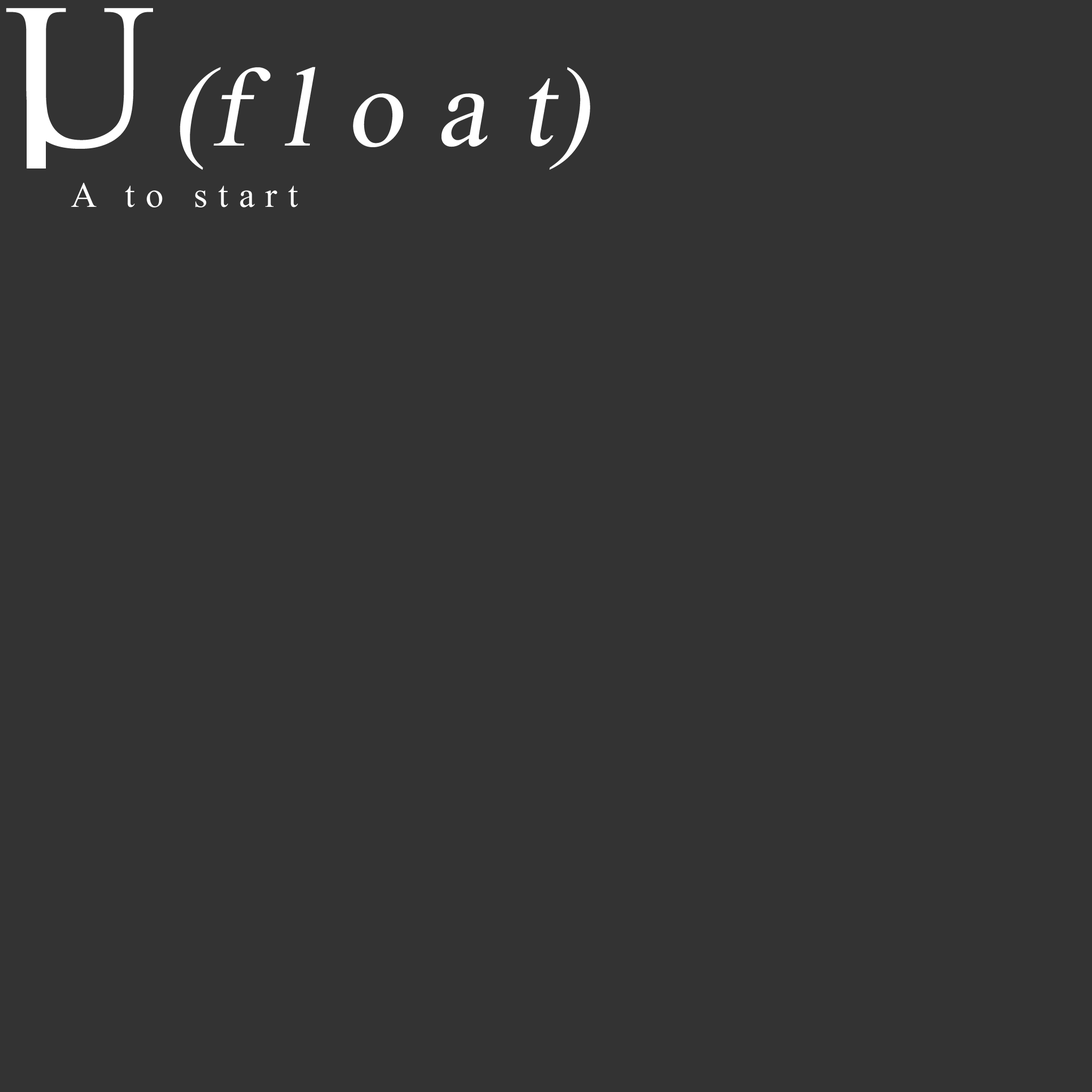
<style>
.page{position:relative;width:1092px;height:1092px;background:#333333}
.page>*{position:absolute;margin:0}
.t1{font:309.6px "Microsoft-Himalaya";letter-spacing:-0.075em;color:#ffffff}
.t2{font:168.5px "Microsoft-Himalaya";letter-spacing:0.2em;color:#ffffff;font-style:italic}
.t3{font:168.5px "Microsoft-Himalaya";color:#ffffff;font-style:italic}
.t4{font:53.3px "Microsoft-Himalaya";letter-spacing:0.2em;color:#ffffff}
</style>
<div class="page">
<p class="t1" style="left:6px;top:8px;width:147px;height:141px">U</p>
<p class="t2" style="left:180px;top:67px;width:410px;height:103px"><span class="t3">(</span>floa<span class="t3">t)</span></p>
<p class="t4" style="left:71px;top:182px;width:227px;height:25px">A to start</p>
</div>
